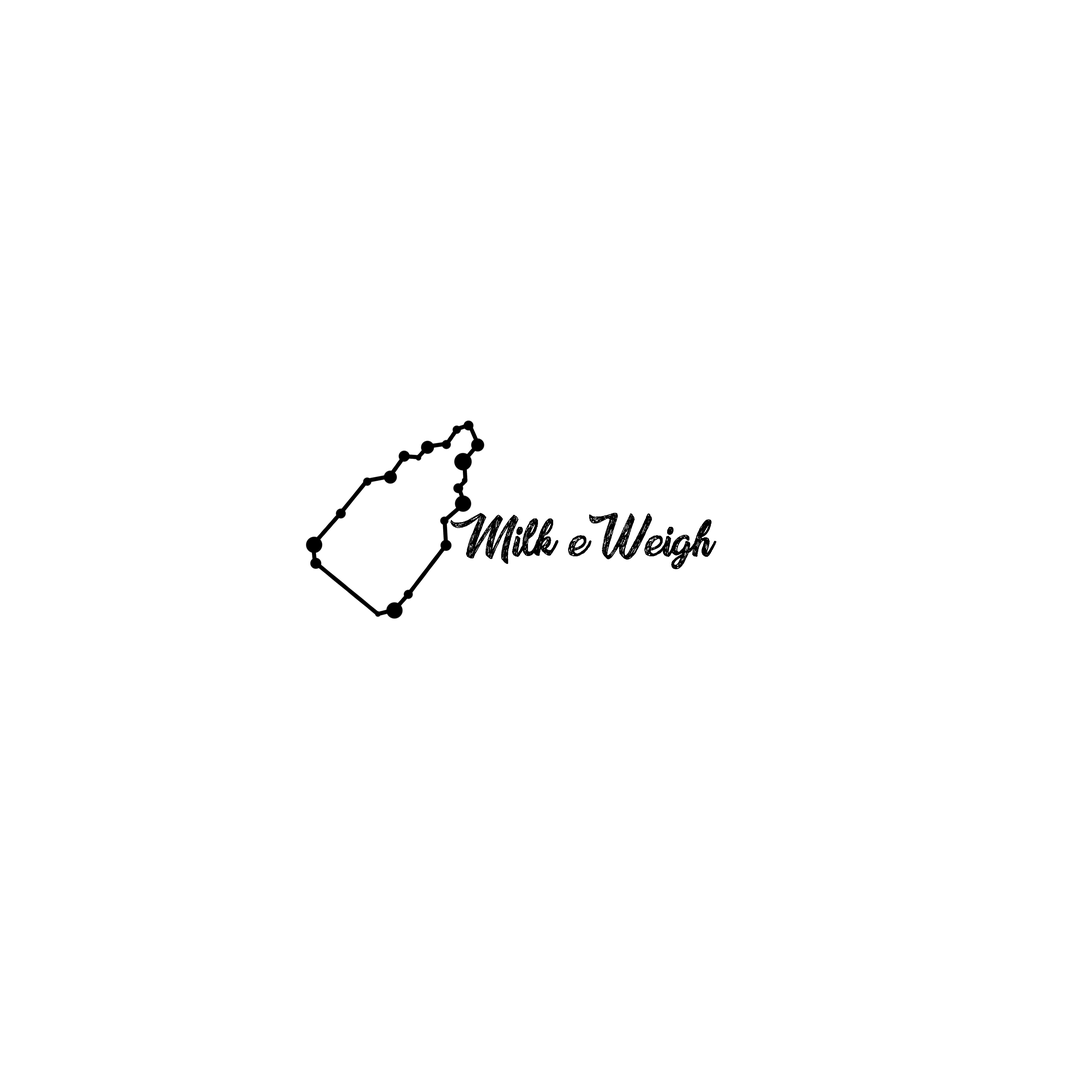
<style>
.page{position:relative;width:1092px;height:1092px;background:#ffffff}
.page>*{position:absolute;margin:0}
.t1{font:60px "DrawingNaturePersonalUse";color:#000000}
</style>
<div class="page">
<p class="t1" style="left:450px;top:512px;width:267px;height:57px">Milk-e Weigh</p>
</div>
